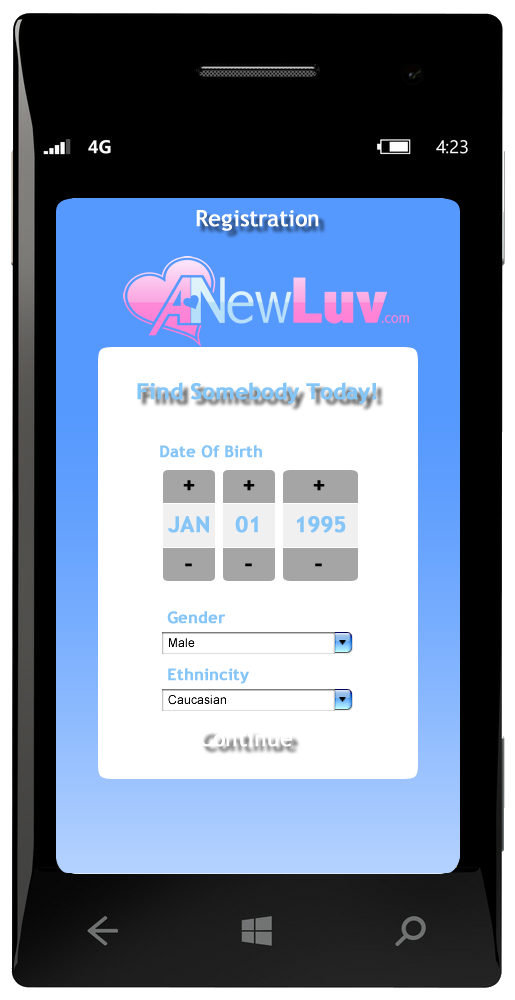
<style>
.page{position:relative;width:515px;height:1000px;background:#ffffff}
.page>*{position:absolute;margin:0}
.t1{font:22px "TrebuchetMS";color:#ffffff;font-weight:bold}
.t2{font:22px "TrebuchetMS-Bold";color:#85c6f8;font-weight:bold}
.t3{font:16px "TrebuchetMS-Bold";color:#85c5f8;font-weight:bold}
.t4{font:22px "TrebuchetMS-Bold";color:#000000;font-weight:bold}
.t5{font:22px "TrebuchetMS-Bold";color:#85c5f8;font-weight:bold}
</style>
<div class="page">
<p class="t1" style="left:196px;top:210px;width:123px;height:21px">Registration</p>
<p class="t2" style="left:137px;top:382px;width:240px;height:22px">Find Somebody Today!</p>
<p class="t3" style="left:160px;top:445px;width:102px;height:13px">Date Of Birth</p>
<p class="t4" style="left:183px;top:480px;width:12px;height:11px">+</p>
<p class="t4" style="left:243px;top:480px;width:12px;height:11px">+</p>
<p class="t4" style="left:313px;top:480px;width:12px;height:11px">+</p>
<p class="t5" style="left:168px;top:516px;width:41px;height:17px">JAN</p>
<p class="t5" style="left:235px;top:516px;width:23px;height:17px">01</p>
<p class="t5" style="left:297px;top:516px;width:49px;height:17px">1995</p>
<p class="t4" style="left:185px;top:563px;width:7px;height:4px">-</p>
<p class="t4" style="left:245px;top:563px;width:7px;height:4px">-</p>
<p class="t4" style="left:315px;top:563px;width:7px;height:4px">-</p>
<p class="t3" style="left:167px;top:611px;width:59px;height:13px">Gender</p>
<p class="t3" style="left:168px;top:668px;width:81px;height:16px">Ethnincity</p>
<p class="t1" style="left:199px;top:730px;width:94px;height:17px">Continue</p>
</div>
